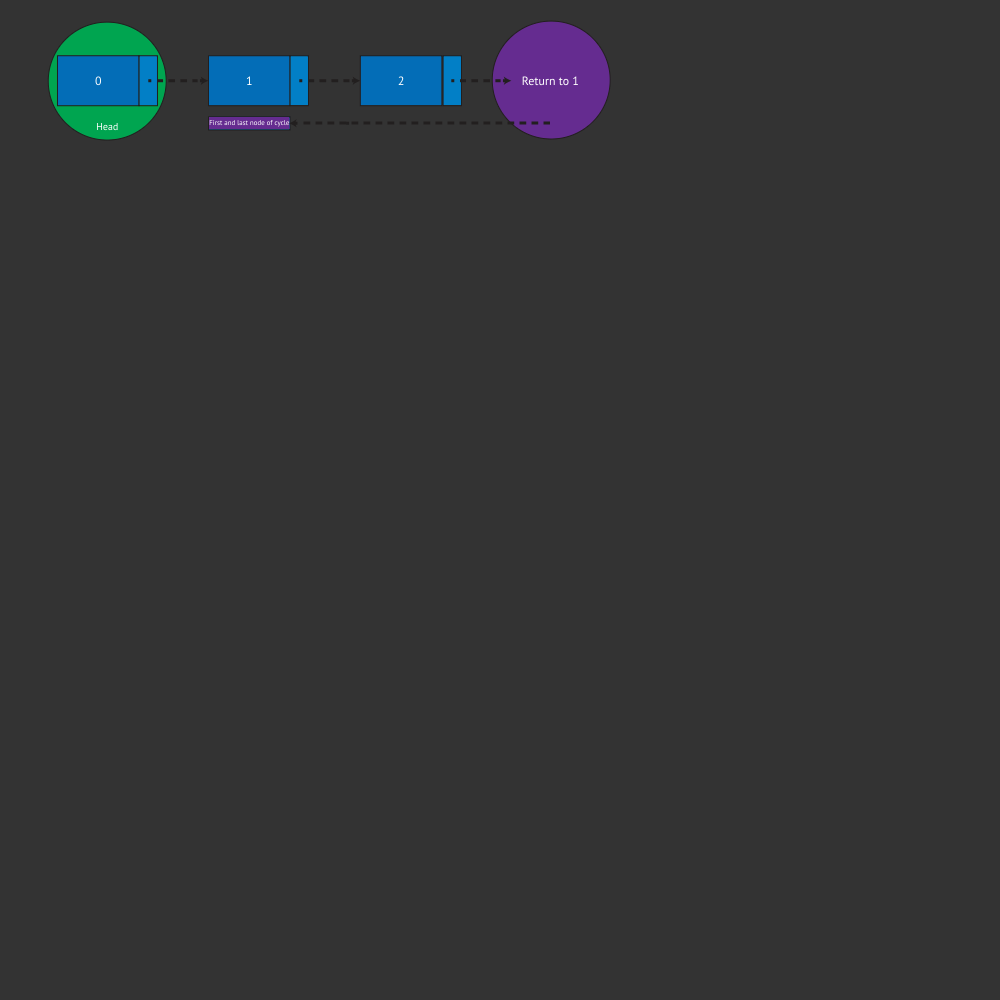
<style>
.page{position:relative;width:1000px;height:1000px;background:#333333}
.page>*{position:absolute;margin:0}
.t1{font:12px "MyriadPro-Regular";color:#ffffff}
.t2{font:12px "MyriadPro-Regular";color:#fafcfe}
.t3{font:10px "MyriadPro-Regular";color:#ffffff}
.t4{font:7px "MyriadPro-Regular"}
</style>
<div class="page">
<p class="t1" style="left:95px;top:76px;width:7px;height:10px">0</p>
<p class="t1" style="left:246px;top:76px;width:6px;height:9px">1</p>
<p class="t2" style="left:398px;top:76px;width:6px;height:9px">2</p>
<p class="t1" style="left:522px;top:76px;width:56px;height:10px">Return to 1</p>
<p class="t3" style="left:96px;top:123px;width:22px;height:8px">Head</p>
<p class="t4" style="left:209px;top:120px;width:81px;height:7px">First and last node of cycle</p>
</div>
